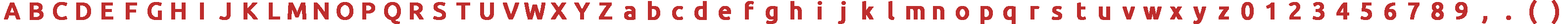
<style>
.page{position:relative;width:1568px;height:24px;background:#ffffff}
.page>*{position:absolute;margin:0}
.t1{font:23.8px "Ubuntu-Medium";color:#be2d2d;font-weight:bold}
</style>
<div class="page">
<p class="t1" style="left:4px;top:2px;width:16px;height:17px">A</p>
<p class="t1" style="left:30px;top:2px;width:14px;height:18px">B</p>
<p class="t1" style="left:53px;top:2px;width:14px;height:18px">C</p>
<p class="t1" style="left:76px;top:2px;width:15px;height:18px">D</p>
<p class="t1" style="left:101px;top:2px;width:12px;height:17px">E</p>
<p class="t1" style="left:126px;top:2px;width:11px;height:17px">F</p>
<p class="t1" style="left:147px;top:2px;width:15px;height:18px">G</p>
<p class="t1" style="left:171px;top:2px;width:15px;height:17px">H</p>
<p class="t1" style="left:219px;top:2px;width:12px;height:18px">J</p>
<p class="t1" style="left:244px;top:2px;width:14px;height:17px">K</p>
<p class="t1" style="left:269px;top:2px;width:11px;height:17px">L</p>
<p class="t1" style="left:288px;top:2px;width:18px;height:17px">M</p>
<p class="t1" style="left:314px;top:2px;width:15px;height:17px">N</p>
<p class="t1" style="left:337px;top:2px;width:16px;height:18px">O</p>
<p class="t1" style="left:362px;top:2px;width:13px;height:17px">P</p>
<p class="t1" style="left:384px;top:2px;width:17px;height:22px">Q</p>
<p class="t1" style="left:410px;top:2px;width:14px;height:17px">R</p>
<p class="t1" style="left:433px;top:2px;width:13px;height:18px">S</p>
<p class="t1" style="left:456px;top:2px;width:14px;height:17px">T</p>
<p class="t1" style="left:480px;top:2px;width:14px;height:18px">U</p>
<p class="t1" style="left:503px;top:2px;width:16px;height:17px">V</p>
<p class="t1" style="left:524px;top:2px;width:21px;height:17px">W</p>
<p class="t1" style="left:551px;top:2px;width:16px;height:17px">X</p>
<p class="t1" style="left:574px;top:2px;width:16px;height:17px">Y</p>
<p class="t1" style="left:599px;top:2px;width:13px;height:17px">Z</p>
<p class="t1" style="left:624px;top:6px;width:12px;height:14px">a</p>
<p class="t1" style="left:648px;top:1px;width:12px;height:19px">b</p>
<p class="t1" style="left:672px;top:6px;width:11px;height:14px">c</p>
<p class="t1" style="left:694px;top:1px;width:13px;height:19px">d</p>
<p class="t1" style="left:719px;top:6px;width:12px;height:14px">e</p>
<p class="t1" style="left:745px;top:1px;width:9px;height:18px">f</p>
<p class="t1" style="left:766px;top:6px;width:12px;height:18px">g</p>
<p class="t1" style="left:790px;top:1px;width:12px;height:18px">h</p>
<p class="t1" style="left:818px;top:1px;width:4px;height:18px">i</p>
<p class="t1" style="left:838px;top:1px;width:8px;height:23px">j</p>
<p class="t1" style="left:862px;top:1px;width:12px;height:18px">k</p>
<p class="t1" style="left:888px;top:1px;width:6px;height:19px">l</p>
<p class="t1" style="left:906px;top:6px;width:19px;height:13px">m</p>
<p class="t1" style="left:933px;top:6px;width:11px;height:13px">n</p>
<p class="t1" style="left:956px;top:6px;width:13px;height:14px">o</p>
<p class="t1" style="left:980px;top:6px;width:13px;height:18px">p</p>
<p class="t1" style="left:1003px;top:6px;width:13px;height:18px">q</p>
<p class="t1" style="left:1030px;top:6px;width:9px;height:13px">r</p>
<p class="t1" style="left:1052px;top:6px;width:10px;height:14px">s</p>
<p class="t1" style="left:1077px;top:2px;width:9px;height:18px">t</p>
<p class="t1" style="left:1241px;top:2px;width:13px;height:18px">0</p>
<p class="t1" style="left:1266px;top:2px;width:8px;height:17px">1</p>
<p class="t1" style="left:1289px;top:2px;width:12px;height:17px">2</p>
<p class="t1" style="left:1313px;top:2px;width:11px;height:18px">3</p>
<p class="t1" style="left:1336px;top:2px;width:13px;height:17px">4</p>
<p class="t1" style="left:1361px;top:2px;width:11px;height:18px">5</p>
<p class="t1" style="left:1384px;top:2px;width:12px;height:18px">6</p>
<p class="t1" style="left:1408px;top:2px;width:12px;height:17px">7</p>
<p class="t1" style="left:1431px;top:2px;width:13px;height:18px">8</p>
<p class="t1" style="left:1455px;top:2px;width:13px;height:17px">9</p>
<p class="t1" style="left:1529px;top:0px;width:8px;height:24px">(</p>
<p class="t1" style="left:1552px;top:0px;width:7px;height:24px">)</p>
<p class="t1" style="left:1099px;top:6px;width:11px;height:14px">u</p>
<p class="t1" style="left:1123px;top:6px;width:12px;height:13px">v</p>
<p class="t1" style="left:1143px;top:6px;width:19px;height:13px">w</p>
<p class="t1" style="left:1170px;top:6px;width:12px;height:13px">x</p>
<p class="t1" style="left:1193px;top:6px;width:13px;height:18px">y</p>
<p class="t1" style="left:1219px;top:6px;width:10px;height:13px">z</p>
<p class="t1" style="left:1482px;top:16px;width:5px;height:7px">,</p>
<p class="t1" style="left:1506px;top:15px;width:5px;height:5px">.</p>
</div>
